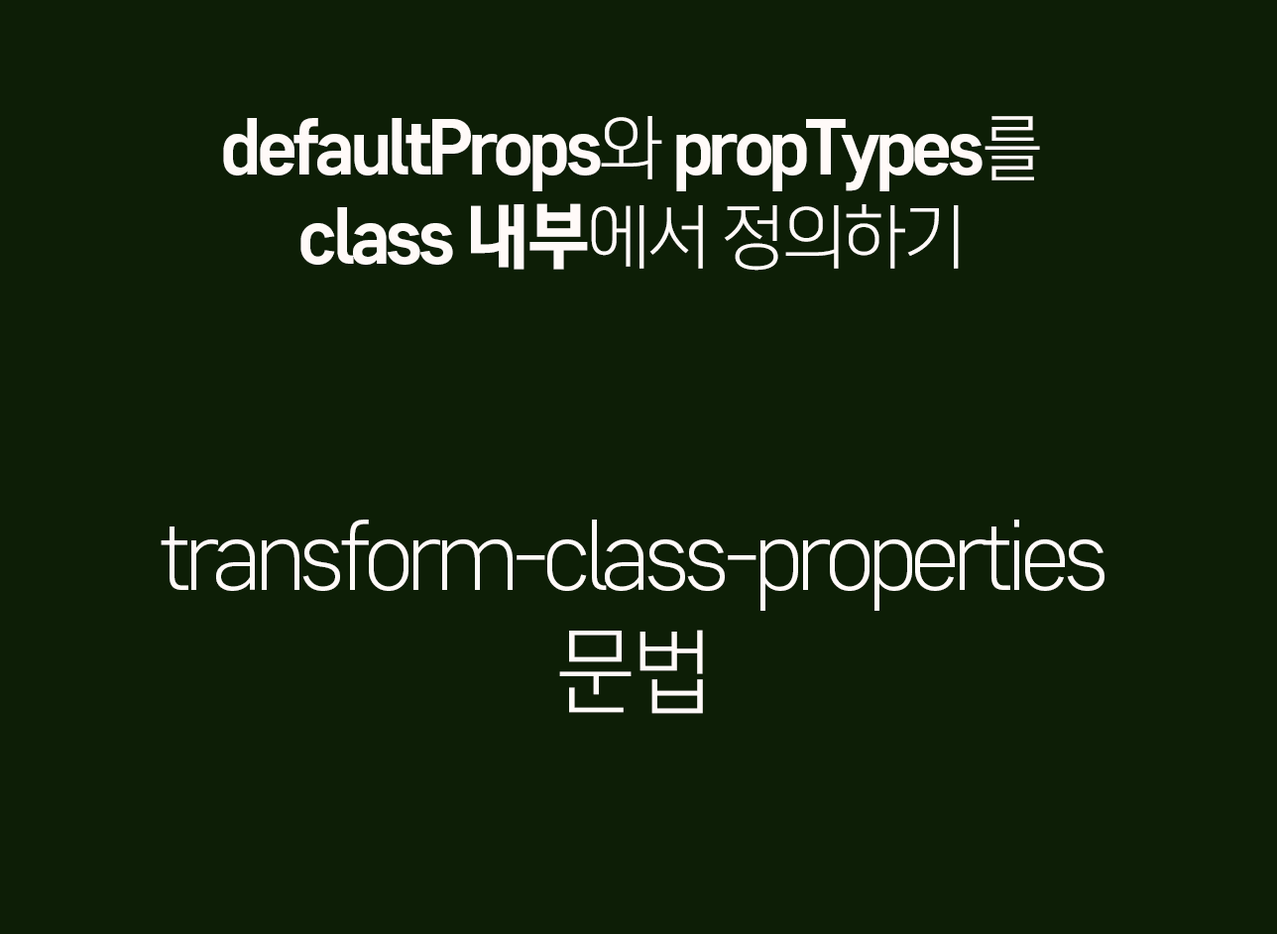
<style>
.page{position:relative;width:1277px;height:934px;background:#0d1e06}
.page>*{position:absolute;margin:0}
.t1{font:71.4px/89.2px "CoreGothicD-7ExtraBold";letter-spacing:-0.075em;color:#fffaf8}
.t2{font:71.4px/89.2px "CoreGothicD-3Light";letter-spacing:-0.075em;color:#fffaf8}
.t3{font:91.7px/114.6px "CoreGothicD-3Light";letter-spacing:-0.075em;color:#fffaf8}
</style>
<div class="page">
<p class="t1" style="left:223px;top:116px;width:817px;height:155px;text-align:center">defaultProps<span class="t2">와 </span>propTypes<span class="t2">를<br></span>class 내부<span class="t2">에서 정의하기</span></p>
<p class="t3" style="left:161px;top:519px;width:943px;height:195px;text-align:center">transform-class-properties<br>문법</p>
</div>
